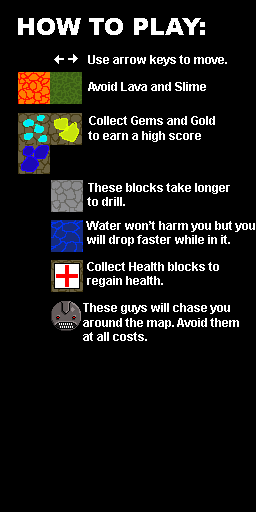
<style>
.page{position:relative;width:256px;height:512px;background:#000000}
.page>*{position:absolute;margin:0}
.t1{font:24px "Arial-Black";color:#ffffff}
.t2{font:12px "Arial-BoldMT";color:#ffffff}
</style>
<div class="page">
<p class="t1" style="left:18px;top:18px;width:187px;height:17px">HOW TO PLAY:</p>
<p class="t2" style="left:88px;top:55px;width:139px;height:11px">Use arrow keys to move.</p>
<p class="t2" style="left:88px;top:82px;width:118px;height:9px">Avoid Lava and Slime</p>
<p class="t2" style="left:88px;top:116px;width:127px;height:26px">Collect Gems and Gold <br>to earn a high score</p>
<p class="t2" style="left:87px;top:183px;width:143px;height:23px">These blocks take longer<br>to drill.</p>
<p class="t2" style="left:86px;top:221px;width:169px;height:25px">Water won’t harm you but you <br>will drop faster while in it.</p>
<p class="t2" style="left:87px;top:262px;width:132px;height:25px">Collect Health blocks to <br>regain health.</p>
<p class="t2" style="left:83px;top:303px;width:156px;height:38px">These guys will chase you<br>around the map. Avoid them<br>at all costs.</p>
</div>
